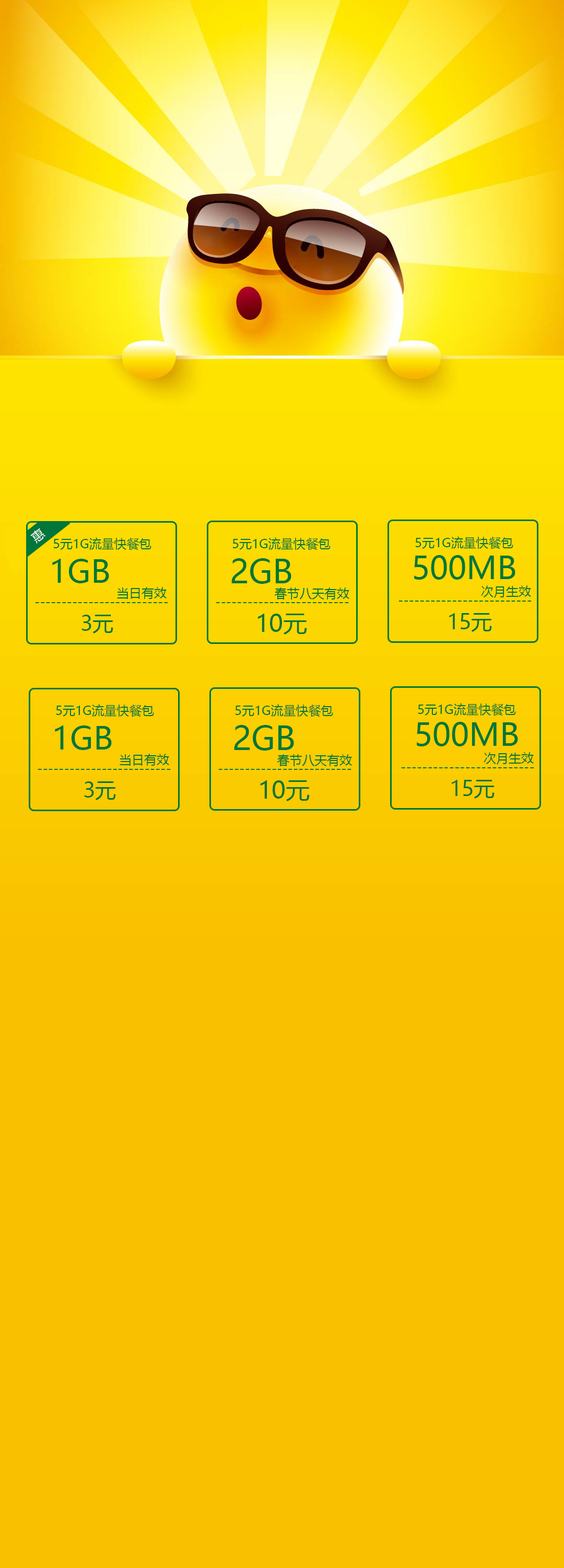
<style>
.page{position:relative;width:564px;height:1568px;background:#f9c000}
.page>*{position:absolute;margin:0}
.t1{font:12.5px "MicrosoftYaHei";letter-spacing:-0.005em;color:#00763a}
.t2{font:31.6px "MicrosoftYaHei";letter-spacing:-0.005em;color:#00763a}
.t3{font:32.5px "MicrosoftYaHei";letter-spacing:-0.005em;color:#00763a}
.t4{font:20.7px "MicrosoftYaHei";letter-spacing:-0.005em;color:#00763a}
.t5{font:23.9px "MicrosoftYaHei";letter-spacing:-0.005em;color:#00763a}
</style>
<div class="page">
<p class="t1" style="left:54px;top:537px;width:98px;height:13px">5元1G流量快餐包</p>
<p class="t1" style="left:233px;top:537px;width:98px;height:13px">5元1G流量快餐包</p>
<p class="t1" style="left:416px;top:536px;width:98px;height:13px">5元1G流量快餐包</p>
<p class="t2" style="left:414px;top:555px;width:102px;height:25px">500MB</p>
<p class="t2" style="left:52px;top:559px;width:57px;height:24px">1GB</p>
<p class="t3" style="left:232px;top:558px;width:60px;height:26px">2GB</p>
<p class="t1" style="left:117px;top:587px;width:50px;height:12px">当日有效</p>
<p class="t1" style="left:274px;top:587px;width:76px;height:12px">春节八天有效</p>
<p class="t1" style="left:481px;top:585px;width:51px;height:13px">次月生效</p>
<p class="t1" style="left:35px;top:602px;width:133px;height:1px">-------------------------</p>
<p class="t1" style="left:216px;top:602px;width:133px;height:1px">-------------------------</p>
<p class="t1" style="left:399px;top:601px;width:133px;height:1px">-------------------------</p>
<p class="t4" style="left:82px;top:615px;width:31px;height:18px">3元</p>
<p class="t5" style="left:258px;top:614px;width:49px;height:21px">10元</p>
<p class="t4" style="left:449px;top:613px;width:43px;height:19px">15元</p>
<p class="t1" style="left:56px;top:704px;width:98px;height:13px">5元1G流量快餐包</p>
<p class="t1" style="left:236px;top:704px;width:97px;height:13px">5元1G流量快餐包</p>
<p class="t1" style="left:419px;top:703px;width:97px;height:13px">5元1G流量快餐包</p>
<p class="t2" style="left:55px;top:725px;width:57px;height:25px">1GB</p>
<p class="t3" style="left:234px;top:725px;width:60px;height:26px">2GB</p>
<p class="t2" style="left:417px;top:722px;width:101px;height:24px">500MB</p>
<p class="t1" style="left:120px;top:754px;width:49px;height:12px">当日有效</p>
<p class="t1" style="left:277px;top:754px;width:75px;height:12px">春节八天有效</p>
<p class="t1" style="left:484px;top:752px;width:50px;height:13px">次月生效</p>
<p class="t1" style="left:38px;top:769px;width:133px;height:1px">-------------------------</p>
<p class="t1" style="left:218px;top:769px;width:134px;height:1px">-------------------------</p>
<p class="t1" style="left:401px;top:767px;width:134px;height:1px">-------------------------</p>
<p class="t4" style="left:84px;top:781px;width:32px;height:19px">3元</p>
<p class="t5" style="left:260px;top:780px;width:50px;height:21px">10元</p>
<p class="t4" style="left:452px;top:780px;width:43px;height:19px">15元</p>
</div>
